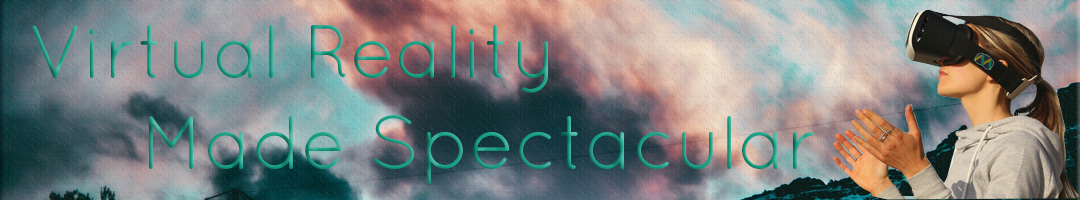
<style>
.page{position:relative;width:1080px;height:200px}
.page>*{position:absolute;margin:0}
.t1{font:75.6px "Quicksand-Regular"}
</style>
<div class="page">
<p class="t1" style="left:32px;top:25px;width:782px;height:159px">Virtual Reality <br>     Made Spectacular</p>
</div>
